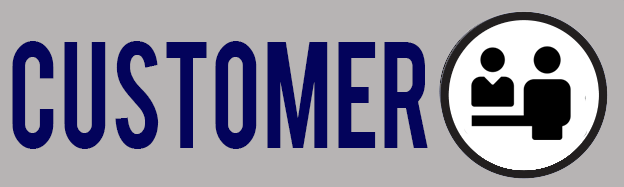
<style>
.page{position:relative;width:624px;height:187px;background:#b7b4b4}
.page>*{position:absolute;margin:0}
.t1{font:119.3px "Bebas";color:#03035b;scale:0.8 1}
</style>
<div class="page">
<p class="t1" style="left:12px;top:41px;width:416px;height:108px">customer</p>
</div>
